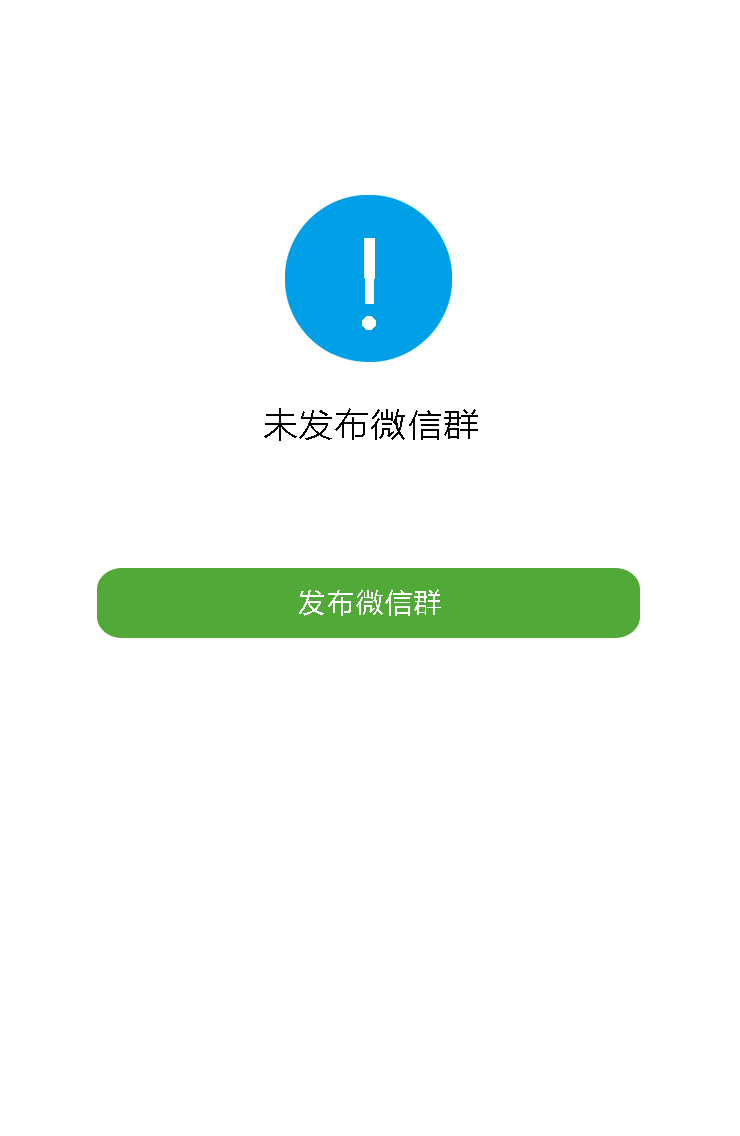
<style>
.page{position:relative;width:740px;height:1136px;background:#ffffff}
.page>*{position:absolute;margin:0}
.t1{font:33.5px "MicrosoftYaHei";letter-spacing:0.08em;color:#000000}
.t2{font:27.3px "MicrosoftYaHei";letter-spacing:0.08em;color:#ffffff}
</style>
<div class="page">
<p class="t1" style="left:264px;top:408px;width:214px;height:33px">未发布微信群</p>
<p class="t2" style="left:299px;top:589px;width:142px;height:27px">发布微信群</p>
</div>
